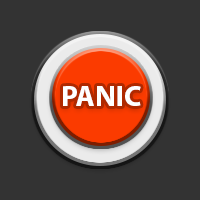
<style>
.page{position:relative;width:200px;height:200px;background:#333333}
.page>*{position:absolute;margin:0}
.t1{font:29.2px "MyriadPro-Bold";color:#ffffff}
</style>
<div class="page">
<p class="t1" style="left:63px;top:86px;width:78px;height:20px">PANIC</p>
</div>
